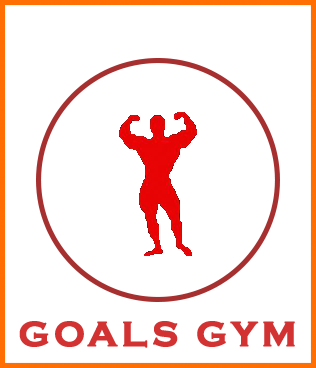
<style>
.page{position:relative;width:316px;height:368px;background:#ffffff}
.page>*{position:absolute;margin:0}
.t1{font:36px "CopperplateGothic-Bold";letter-spacing:0.1em;color:#d23232;font-weight:bold}
</style>
<div class="page">
<p class="t1" style="left:19px;top:321px;width:276px;height:27px">GOALS GYM</p>
</div>
